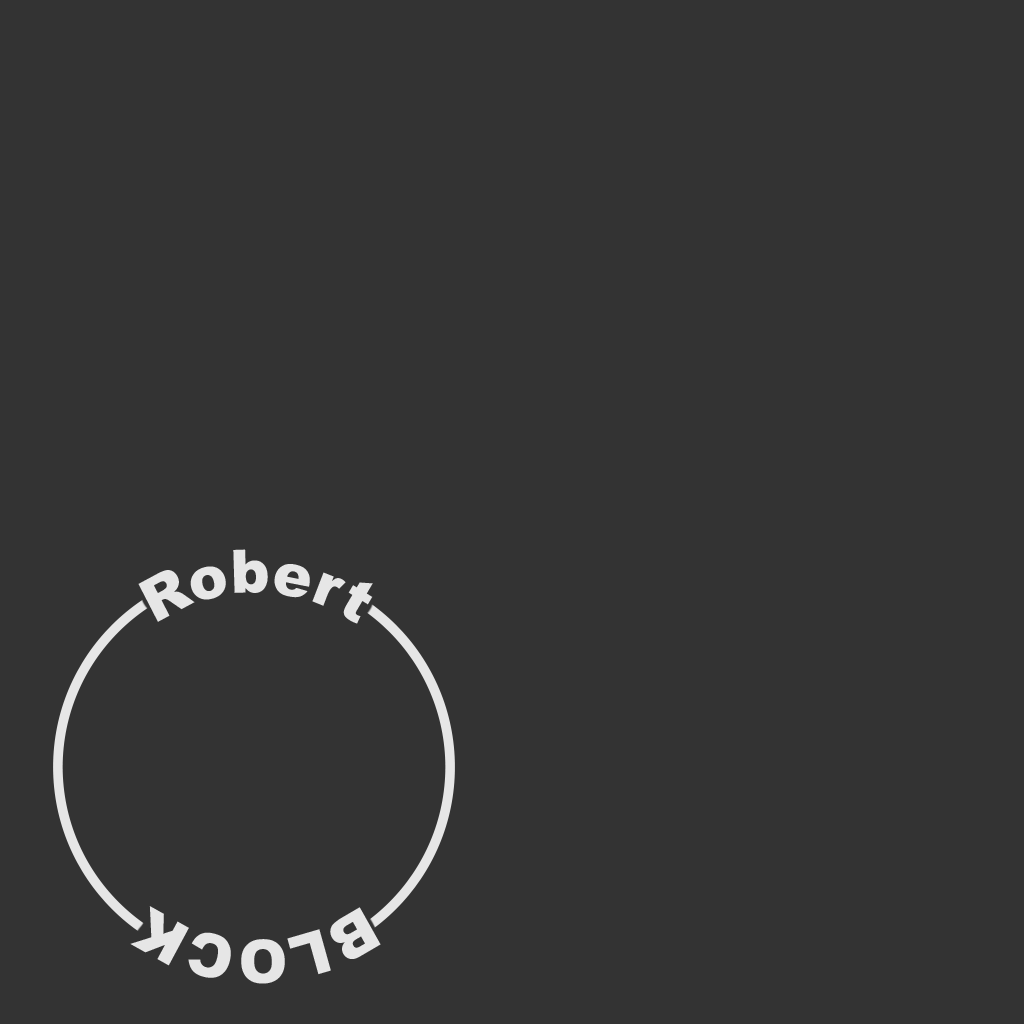
<style>
.page{position:relative;width:1024px;height:1024px;background:#333333}
.page>*{position:absolute;margin:0}
.t1{font:60px "Arial-Black";color:#e6e6e6}
</style>
<div class="page">
<p class="t1" style="left:138px;top:549px;width:235px;height:75px">Robert</p>
<p class="t1" style="left:130px;top:906px;width:251px;height:78px">BLOCK</p>
</div>
